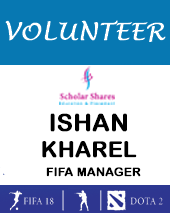
<style>
.page{position:relative;width:170px;height:213px;background:#ffffff}
.page>*{position:absolute;margin:0}
.t1{font:24px "LucidaHandwriting-Italic";color:#ffffff;font-weight:bold}
.t2{font:22px "ArialRoundedMTBold";color:#000000;font-weight:bold}
.t3{font:24px "ArialRoundedMTBold";color:#000000;font-weight:bold}
.t4{font:12px "ArialRoundedMTBold";color:#000000;font-weight:bold}
</style>
<div class="page">
<p class="t1" style="left:5px;top:20px;width:161px;height:22px">VOLUNTEER</p>
<p class="t2" style="left:42px;top:113px;width:95px;height:45px;text-align:center"><span class="t3">ISHAN <br></span>KHAREL</p>
<p class="t4" style="left:46px;top:167px;width:95px;height:10px">FIFA MANAGER</p>
</div>
